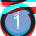
<style>
.page{position:relative;width:36px;height:36px}
.page>*{position:absolute;margin:0}
.t1{font:18px "MS Sans Serif"}
</style>
<div class="page">
<p class="t1" style="left:14px;top:10px;width:5px;height:14px">1</p>
</div>
